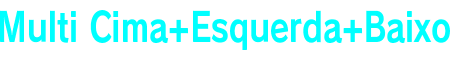
<style>
.page{position:relative;width:450px;height:60px;background:#ffffff}
.page>*{position:absolute;margin:0}
.t1{font:40px "RodinPro-B";color:#00ffff;scale:0.79 1}
</style>
<div class="page">
<p class="t1" style="left:0px;top:10px;width:450px;height:40px">Multi Cima+Esquerda+Baixo</p>
</div>
